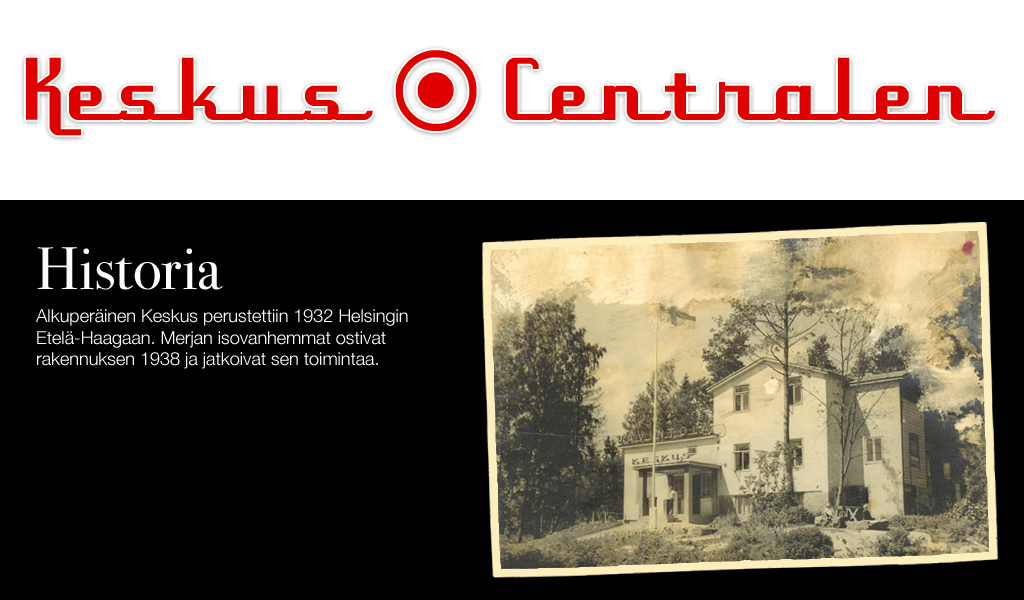
<style>
.page{position:relative;width:1024px;height:600px;background:#000000}
.page>*{position:absolute;margin:0}
.t1{font:86px "UppenArmsNF-Medium";color:#e00000}
.t2{font:140px "AppleSymbols";color:#e00000}
.t3{font:60px "BodoniSvtyTwoITCTTBook";color:#ffffff}
.t4{font:18px "HelveticaNeue-Light";color:#ffffff}
</style>
<div class="page">
<p class="t1" style="left:26px;top:50px;width:969px;height:86px">Keskus <span class="t2">⦿ </span>Centralen</p>
<p class="t3" style="left:37px;top:247px;width:186px;height:43px">Historia</p>
<p class="t4" style="left:36px;top:309px;width:372px;height:60px">Alkuperäinen Keskus perustettiin 1932 Helsingin<br>Etelä-Haagaan. Merjan isovanhemmat ostivat<br>rakennuksen 1938 ja jatkoivat sen toimintaa.</p>
</div>
